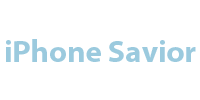
<style>
.page{position:relative;width:200px;height:100px;background:#ffffff}
.page>*{position:absolute;margin:0}
.t1{font:31.2px "MyriadPro-Bold";color:#9bcade}
</style>
<div class="page">
<p class="t1" style="left:6px;top:39px;width:190px;height:23px">iPhone Savior</p>
</div>
